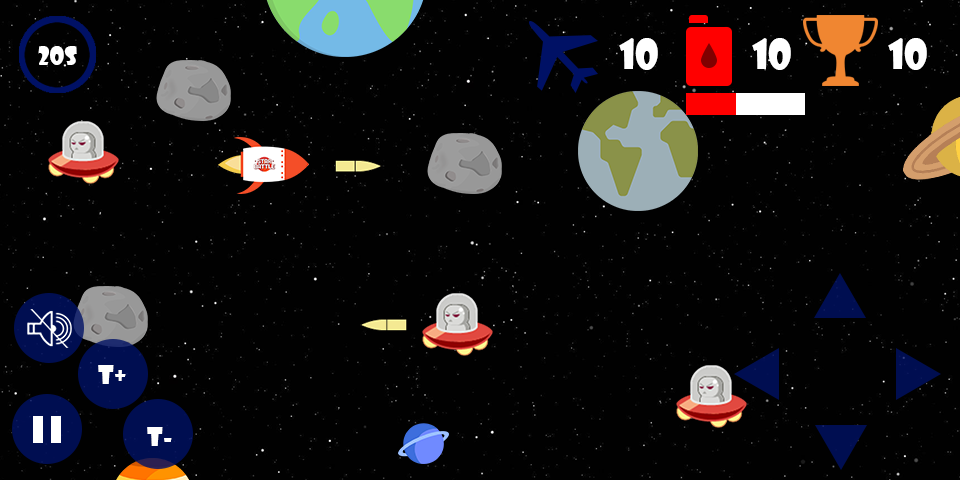
<style>
.page{position:relative;width:960px;height:480px;background:#010101}
.page>*{position:absolute;margin:0}
.t1{font:40px "ShowcardGothic-Reg";color:#ffffff}
.t2{font:25px "ShowcardGothic-Reg";color:#ffffff}
</style>
<div class="page">
<p class="t1" style="left:619px;top:38px;width:39px;height:32px">10</p>
<p class="t1" style="left:752px;top:38px;width:39px;height:32px">10</p>
<p class="t1" style="left:888px;top:38px;width:39px;height:32px">10</p>
<p class="t2" style="left:38px;top:46px;width:39px;height:19px">20S</p>
<p class="t2" style="left:98px;top:365px;width:28px;height:19px">T+</p>
<p class="t2" style="left:147px;top:427px;width:25px;height:19px">T-</p>
</div>
